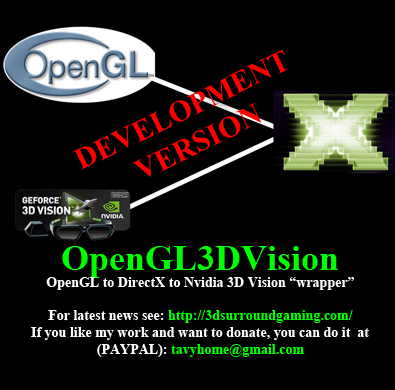
<style>
.page{position:relative;width:395px;height:390px;background:#000000}
.page>*{position:absolute;margin:0}
.t1{font:30px "TimesNewRomanPS-BoldMT";color:#ff0000}
.t2{font:14px "TimesNewRomanPS-BoldMT";color:#ffffff}
.t3{font:36px "TimesNewRomanPS-BoldMT";color:#00ff00}
.t4{font:14px "TimesNewRomanPS-BoldMT";color:#00ff00}
</style>
<div class="page">
<p class="t1" style="left:72px;top:49px;width:216px;height:128px;text-align:center;rotate:-26deg">DEVELOPMENT <br>VERSION</p>
<p class="t2" style="left:31px;top:246px;width:338px;height:111px;text-align:center"><span class="t3">OpenGL3DVision<br></span>OpenGL to DirectX to Nvidia 3D Vision “wrapper”<br><br>For latest news see: <span class="t4">http://3dsurroundgaming.com/<br></span>    If you like my work and want to donate, you can do it  at   (PAYPAL): <span class="t4">tavyhome@gmail.com</span></p>
</div>
